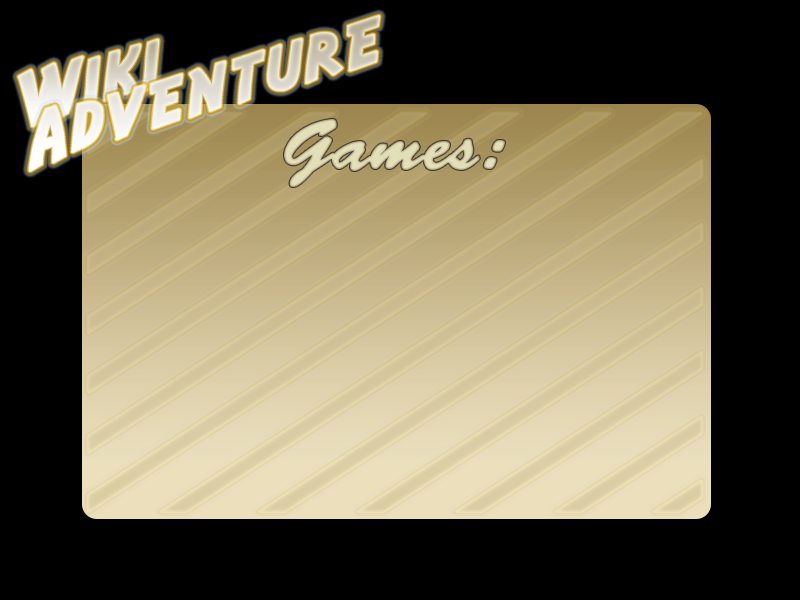
<style>
.page{position:relative;width:800px;height:600px;background:#000000}
.page>*{position:absolute;margin:0}
.t1{font:72px "AdventureNormal";font-weight:bold}
.t2{font:72px "BrushScriptStd";color:#e0dcb6;font-weight:bold}
</style>
<div class="page">
<p class="t1" style="left:29px;top:15px;width:351px;height:157px;rotate:-16deg">Adventure</p>
<p class="t1" style="left:18px;top:39px;width:141px;height:88px;rotate:-16deg">Wiki</p>
<p class="t2" style="left:284px;top:119px;width:221px;height:68px">Games:</p>
</div>
